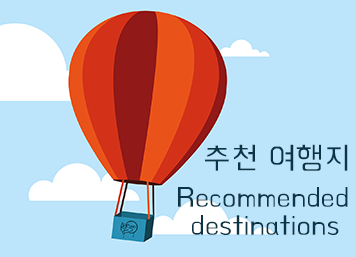
<style>
.page{position:relative;width:356px;height:257px;background:#bce4fa}
.page>*{position:absolute;margin:0}
.t1{font:33.3px "BMHANNAAir";color:#0b3546}
.t2{font:29.2px "BMHANNAAir";color:#0b3546}
</style>
<div class="page">
<p class="t1" style="left:205px;top:144px;width:143px;height:27px">추천 여행지</p>
<p class="t2" style="left:178px;top:187px;width:170px;height:20px">Recommended</p>
<p class="t2" style="left:192px;top:215px;width:147px;height:20px">destinations</p>
</div>
